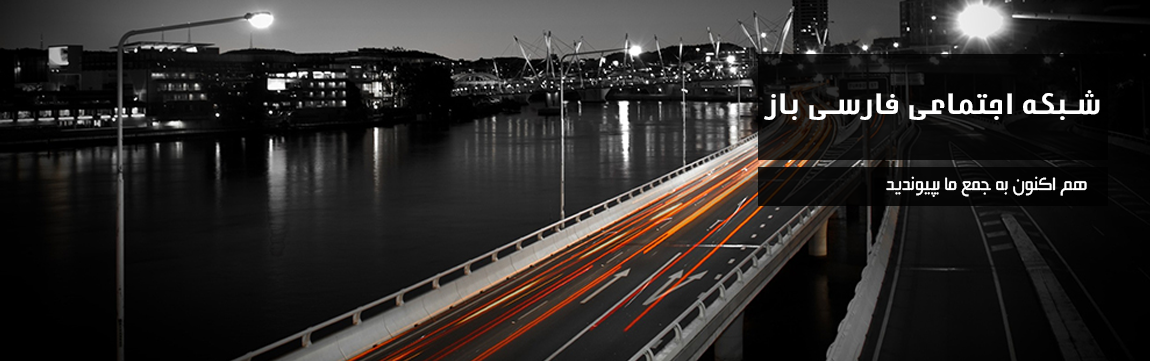
<style>
.page{position:relative;width:1150px;height:361px}
.page>*{position:absolute;margin:0}
.t1{font:32.8px "Mj_Aramco-Bold";color:#ffffff}
.t2{font:21.3px "Mj_BeirutLtX3";color:#ffffff}
</style>
<div class="page">
<p class="t1" style="left:764px;top:90px;width:336px;height:30px">شبکه اجتماعی فارسی باز</p>
<p class="t2" style="left:886px;top:176px;width:201px;height:21px">هم اکنون به جمع ما بپیوندید</p>
</div>
